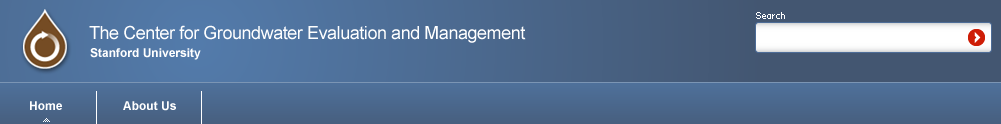
<style>
.page{position:relative;width:1001px;height:124px}
.page>*{position:absolute;margin:0}
.t1{font:10px "MiniHaHa";letter-spacing:-0.1em;color:#ffffff}
.t2{font:18px "ArialMT";letter-spacing:-0.025em;color:#ffffff}
.t3{font:12px "Arial-BoldMT";color:#ffffff}
</style>
<div class="page">
<p class="t1" style="left:756px;top:12px;width:29px;height:7px">Search</p>
<p class="t2" style="left:89px;top:25px;width:437px;height:18px">The Center for Groundwater Evaluation and Management</p>
<p class="t3" style="left:90px;top:48px;width:111px;height:12px">Stanford University</p>
<p class="t3" style="left:30px;top:101px;width:32px;height:9px">Home</p>
<p class="t3" style="left:123px;top:101px;width:53px;height:10px">About Us</p>
</div>
